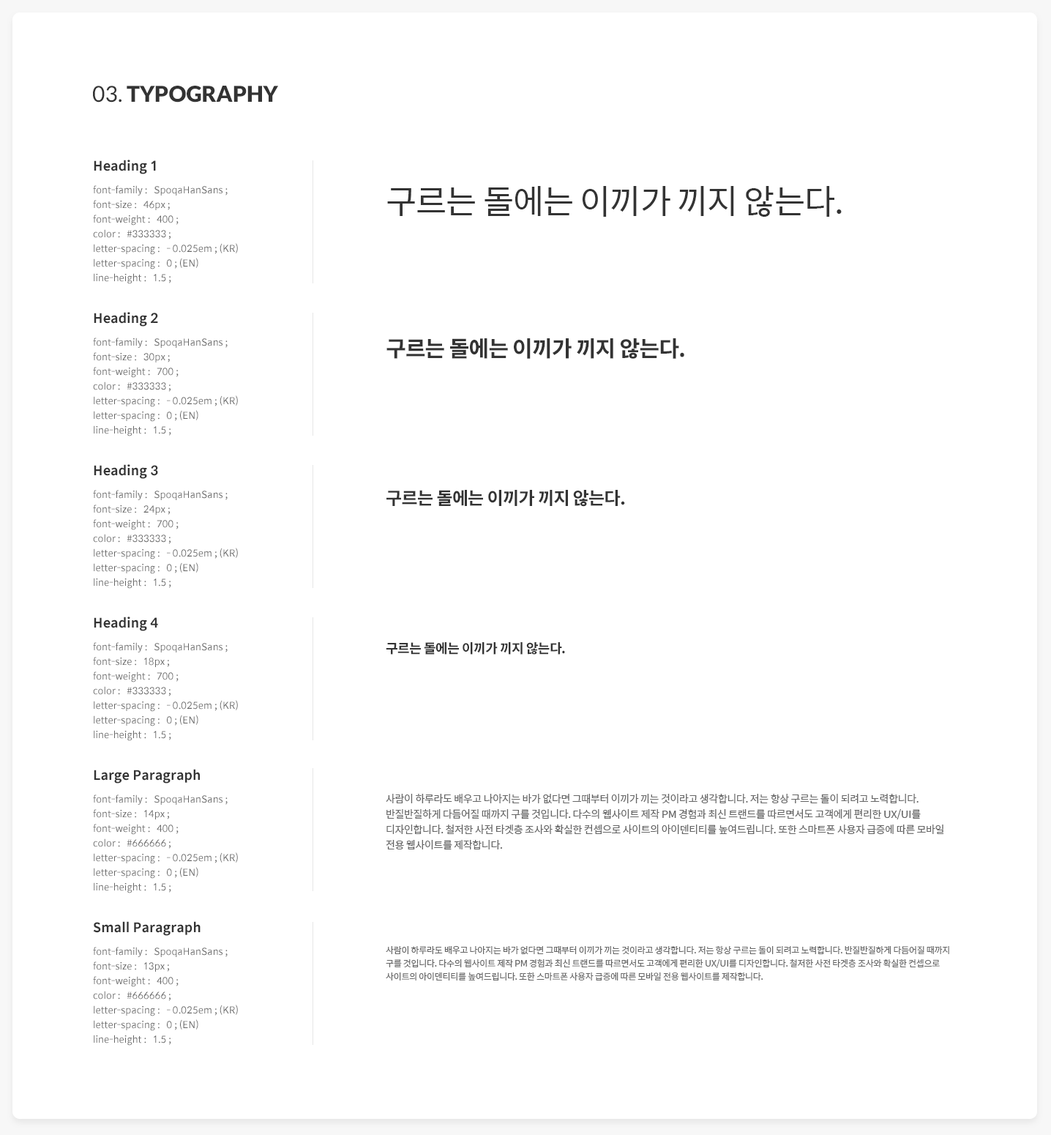
<style>
.page{position:relative;width:1051px;height:1135px;background:#ffffff}
.page>*{position:absolute;margin:0}
.t1{font:22px "Lato-Black";color:#333333}
.t2{font:22px "Lato-Regular";color:#333333}
.t3{font:13.2px "SpoqaHanSans-Bold";color:#333333}
.t4{font:9.5px/14.6px "SpoqaHanSans-Regular";color:#666666}
.t5{font:33.7px "SpoqaHanSans-Regular";letter-spacing:-0.025em;color:#333333}
.t6{font:22px "SpoqaHanSans-Bold";letter-spacing:-0.025em;color:#333333}
.t7{font:17.6px "SpoqaHanSans-Bold";letter-spacing:-0.025em;color:#333333}
.t8{font:13.2px "SpoqaHanSans-Bold";letter-spacing:-0.025em;color:#333333}
.t9{font:10.2px/15.4px "SpoqaHanSans-Regular";letter-spacing:-0.025em;color:#666666}
.t10{font:8.8px/13.2px "SpoqaHanSans-Regular";letter-spacing:-0.025em;color:#666666}
</style>
<div class="page">
<p class="t1" style="left:93px;top:86px;width:185px;height:16px"><span class="t2">03. </span>TYPOGRAPHY</p>
<p class="t3" style="left:94px;top:160px;width:62px;height:14px">Heading 1</p>
<p class="t4" style="left:93px;top:185px;width:145px;height:99px">font-family :   SpoqaHanSans ;<br>font-size :   46px ;<br>font-weight :   400 ;<br>color :   #333333 ;<br>letter-spacing :   - 0.025em ; (KR)<br>letter-spacing :   0 ; (EN)<br>line-height :   1.5 ;</p>
<p class="t5" style="left:387px;top:186px;width:455px;height:31px">구르는 돌에는 이끼가 끼지 않는다.</p>
<p class="t3" style="left:94px;top:312px;width:64px;height:14px">Heading 2</p>
<p class="t4" style="left:93px;top:337px;width:145px;height:99px">font-family :   SpoqaHanSans ;<br>font-size :   30px ;<br>font-weight :   700 ;<br>color :   #333333 ;<br>letter-spacing :   - 0.025em ; (KR)<br>letter-spacing :   0 ; (EN)<br>line-height :   1.5 ;</p>
<p class="t6" style="left:386px;top:338px;width:298px;height:21px">구르는 돌에는 이끼가 끼지 않는다.</p>
<p class="t3" style="left:94px;top:464px;width:64px;height:15px">Heading 3</p>
<p class="t4" style="left:93px;top:490px;width:145px;height:98px">font-family :   SpoqaHanSans ;<br>font-size :   24px ;<br>font-weight :   700 ;<br>color :   #333333 ;<br>letter-spacing :   - 0.025em ; (KR)<br>letter-spacing :   0 ; (EN)<br>line-height :   1.5 ;</p>
<p class="t7" style="left:386px;top:490px;width:239px;height:17px">구르는 돌에는 이끼가 끼지 않는다.</p>
<p class="t3" style="left:94px;top:616px;width:64px;height:15px">Heading 4</p>
<p class="t4" style="left:93px;top:642px;width:145px;height:99px">font-family :   SpoqaHanSans ;<br>font-size :   18px ;<br>font-weight :   700 ;<br>color :   #333333 ;<br>letter-spacing :   - 0.025em ; (KR)<br>letter-spacing :   0 ; (EN)<br>line-height :   1.5 ;</p>
<p class="t8" style="left:386px;top:642px;width:179px;height:12px">구르는 돌에는 이끼가 끼지 않는다.</p>
<p class="t3" style="left:94px;top:769px;width:106px;height:14px">Large Paragraph</p>
<p class="t4" style="left:93px;top:794px;width:145px;height:99px">font-family :   SpoqaHanSans ;<br>font-size :   14px ;<br>font-weight :   400 ;<br>color :   #666666 ;<br>letter-spacing :   - 0.025em ; (KR)<br>letter-spacing :   0 ; (EN)<br>line-height :   1.5 ;</p>
<p class="t9" style="left:386px;top:793px;width:558px;height:57px">사람이 하루라도 배우고 나아지는 바가 없다면 그때부터 이끼가 끼는 것이라고 생각합니다. 저는 항상 구르는 돌이 되려고 노력합니다. 반질반질하게 다듬어질 때까지 구를 것입니다. 다수의 웹사이트 제작 PM 경험과 최신 트랜드를 따르면서도 고객에게 편리한 UX/UI를 디자인합니다. 철저한 사전 타겟층 조사와 확실한 컨셉으로 사이트의 아이덴티티를 높여드립니다. 또한 스마트폰 사용자 급증에 따른 모바일 전용 웹사이트를 제작합니다.</p>
<p class="t3" style="left:93px;top:921px;width:108px;height:14px">Small Paragraph</p>
<p class="t4" style="left:93px;top:946px;width:145px;height:99px">font-family :   SpoqaHanSans ;<br>font-size :   13px ;<br>font-weight :   400 ;<br>color :   #666666 ;<br>letter-spacing :   - 0.025em ; (KR)<br>letter-spacing :   0 ; (EN)<br>line-height :   1.5 ;</p>
<p class="t10" style="left:386px;top:945px;width:563px;height:35px">사람이 하루라도 배우고 나아지는 바가 없다면 그때부터 이끼가 끼는 것이라고 생각합니다. 저는 항상 구르는 돌이 되려고 노력합니다. 반질반질하게 다듬어질 때까지 구를 것입니다. 다수의 웹사이트 제작 PM 경험과 최신 트랜드를 따르면서도 고객에게 편리한 UX/UI를 디자인합니다. 철저한 사전 타겟층 조사와 확실한 컨셉으로 사이트의 아이덴티티를 높여드립니다. 또한 스마트폰 사용자 급증에 따른 모바일 전용 웹사이트를 제작합니다.</p>
</div>
